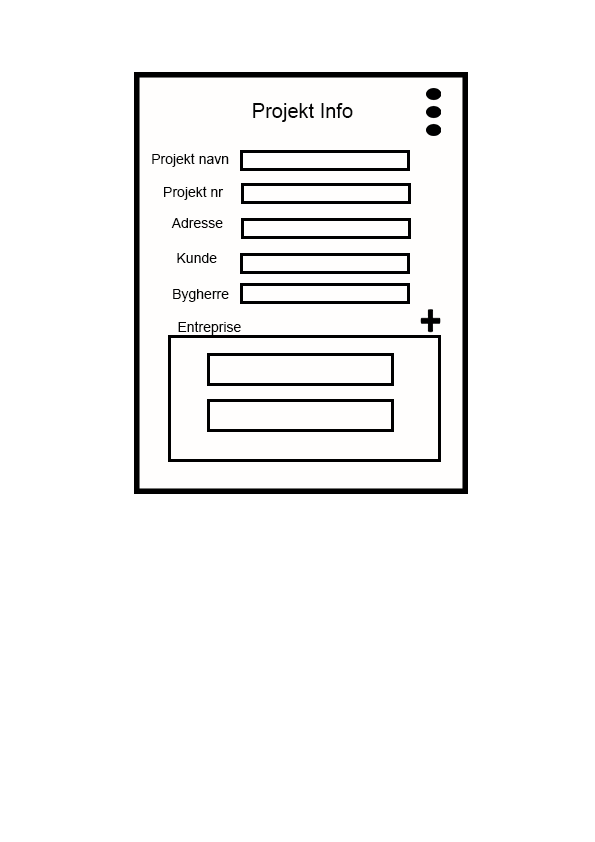
<style>
.page{position:relative;width:595px;height:842px;background:#ffffff}
.page>*{position:absolute;margin:0}
.t1{font:20px "ArialMT";color:#040404}
.t2{font:14px "ArialMT";color:#040404}
</style>
<div class="page">
<p class="t1" style="left:253px;top:103px;width:100px;height:19px">Projekt Info</p>
<p class="t2" style="left:152px;top:153px;width:77px;height:14px">Projekt navn</p>
<p class="t2" style="left:164px;top:186px;width:60px;height:14px">Projekt nr</p>
<p class="t2" style="left:171px;top:218px;width:52px;height:10px">Adresse</p>
<p class="t2" style="left:177px;top:253px;width:40px;height:10px">Kunde</p>
<p class="t2" style="left:173px;top:289px;width:56px;height:13px">Bygherre</p>
<p class="t2" style="left:178px;top:321px;width:63px;height:14px">Entreprise</p>
</div>
